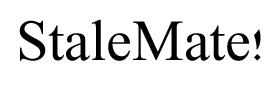
<style>
.page{position:relative;width:280px;height:85px;background:#ffffff}
.page>*{position:absolute;margin:0}
.t1{font:58px "David";color:#000000}
</style>
<div class="page">
<p class="t1" style="left:19px;top:19px;width:242px;height:42px">StaleMate!</p>
</div>
